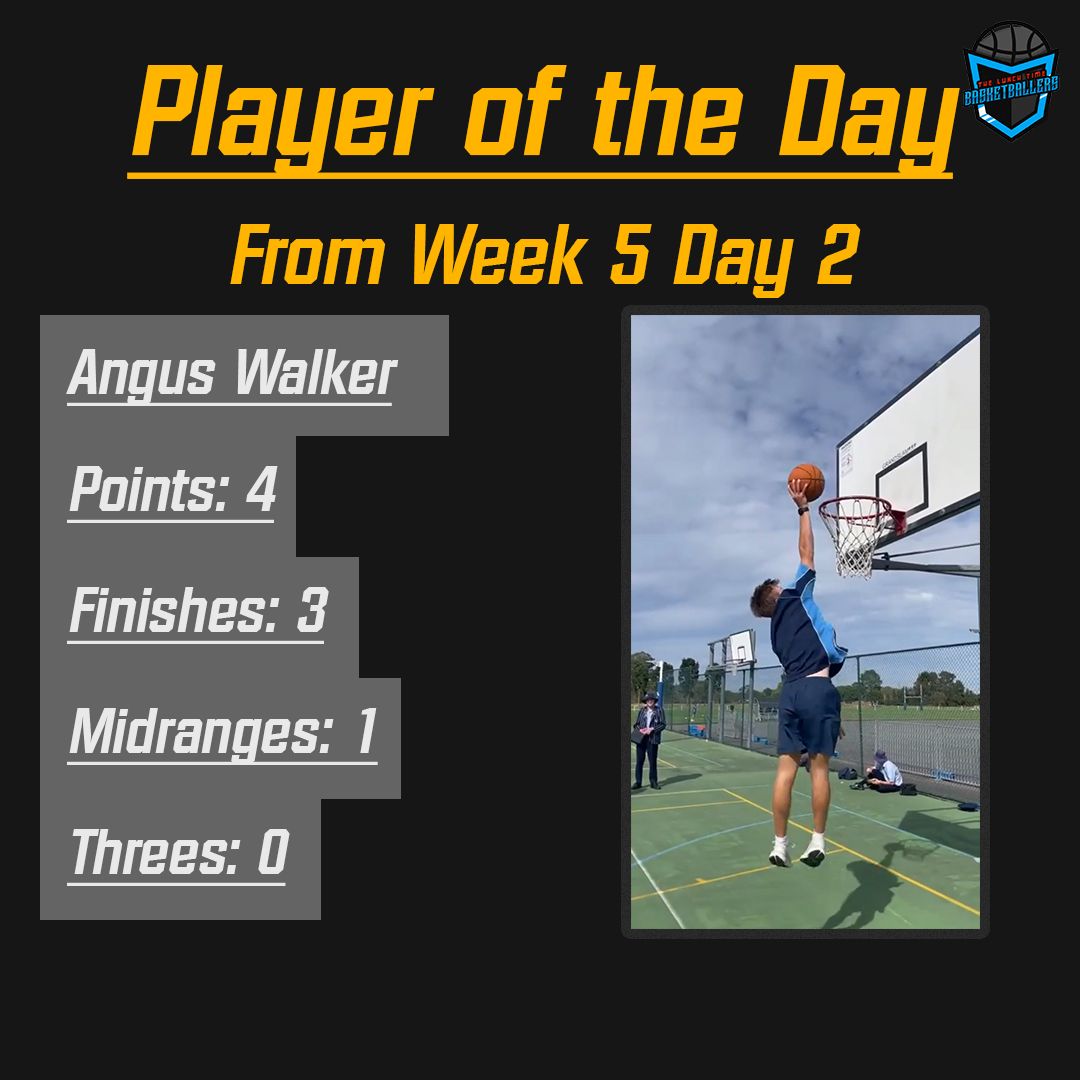
<style>
.page{position:relative;width:1080px;height:1080px;background:#161616}
.page>*{position:absolute;margin:0}
.t1{font:125px/129.2px "Diamante-Serial-BoldItalic";color:#ffb400;text-decoration:underline}
.t2{font:83.3px/129.2px "Diamante-Serial-BoldItalic";color:#ffb400}
.t3{font:62.5px "Diamante-Serial-BoldItalic";color:#e9e9e9;text-decoration:underline}
</style>
<div class="page">
<p class="t1" style="left:127px;top:65px;width:833px;height:233px;text-align:center">Player of the Day<br><span class="t2">From Week 5 Day 2</span></p>
<p class="t3" style="left:66px;top:349px;width:333px;height:57px">Angus Walker</p>
<p class="t3" style="left:67px;top:466px;width:211px;height:57px">Points: 4</p>
<p class="t3" style="left:67px;top:587px;width:262px;height:57px">Finishes: 3</p>
<p class="t3" style="left:67px;top:708px;width:311px;height:57px">Midranges: 1</p>
<p class="t3" style="left:67px;top:829px;width:223px;height:57px">Threes: 0</p>
</div>
